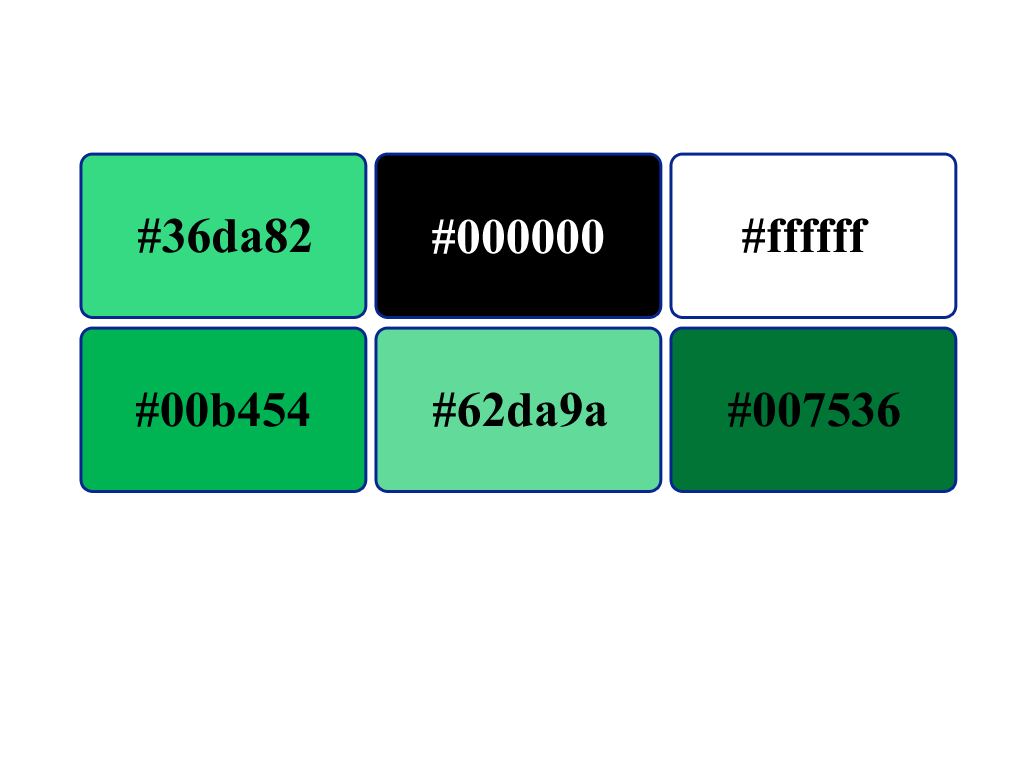
<style>
.page{position:relative;width:1024px;height:768px;background:#ffffff}
.page>*{position:absolute;margin:0}
.t1{font:60px "ShonarBangla-Bold";color:#010101}
.t2{font:60px "ShonarBangla-Bold";color:#ffffff}
.t3{font:60px "ShonarBangla-Bold";color:#000000}
</style>
<div class="page">
<p class="t1" style="left:138px;top:218px;width:173px;height:35px">#36da82</p>
<p class="t2" style="left:432px;top:219px;width:172px;height:35px">#000000</p>
<p class="t3" style="left:742px;top:218px;width:127px;height:35px">#ffffff</p>
<p class="t3" style="left:136px;top:392px;width:174px;height:35px">#00b454</p>
<p class="t3" style="left:433px;top:392px;width:175px;height:35px">#62da9a</p>
<p class="t3" style="left:728px;top:392px;width:172px;height:35px">#007536</p>
</div>
